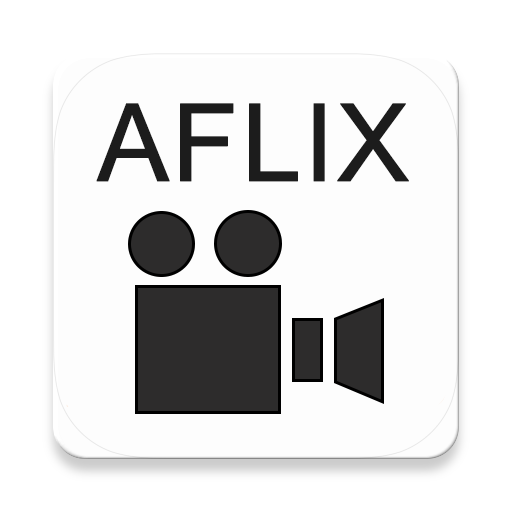
<style>
.page{position:relative;width:512px;height:512px;background:#fdfdfd}
.page>*{position:absolute;margin:0}
.t1{font:120px "Raavi";color:#1c1c1c;font-weight:bold}
</style>
<div class="page">
<p class="t1" style="left:96px;top:103px;width:313px;height:79px">AFLIX</p>
</div>
